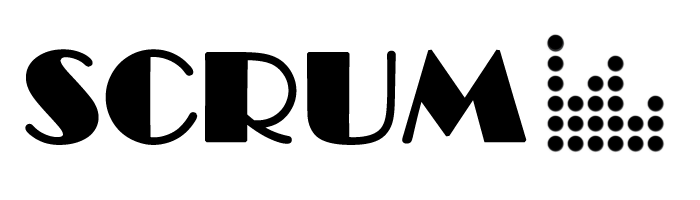
<style>
.page{position:relative;width:700px;height:200px;background:#ffffff}
.page>*{position:absolute;margin:0}
.t1{font:130px "Broadway";color:#000000;font-weight:bold}
</style>
<div class="page">
<p class="t1" style="left:25px;top:49px;width:502px;height:96px">SCRUM</p>
</div>
